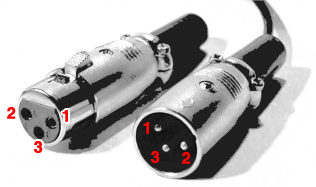
<style>
.page{position:relative;width:316px;height:187px;background:#ffffff}
.page>*{position:absolute;margin:0}
.t1{font:16px "Helvetica-Bold";letter-spacing:-0.01em;color:#ff0000;font-weight:bold}
</style>
<div class="page">
<p class="t1" style="left:7px;top:107px;width:9px;height:12px">2</p>
<p class="t1" style="left:62px;top:110px;width:6px;height:12px">1</p>
<p class="t1" style="left:143px;top:122px;width:6px;height:12px">1</p>
<p class="t1" style="left:34px;top:141px;width:9px;height:12px">3</p>
<p class="t1" style="left:151px;top:151px;width:9px;height:12px">3</p>
<p class="t1" style="left:182px;top:152px;width:9px;height:12px">2</p>
</div>
